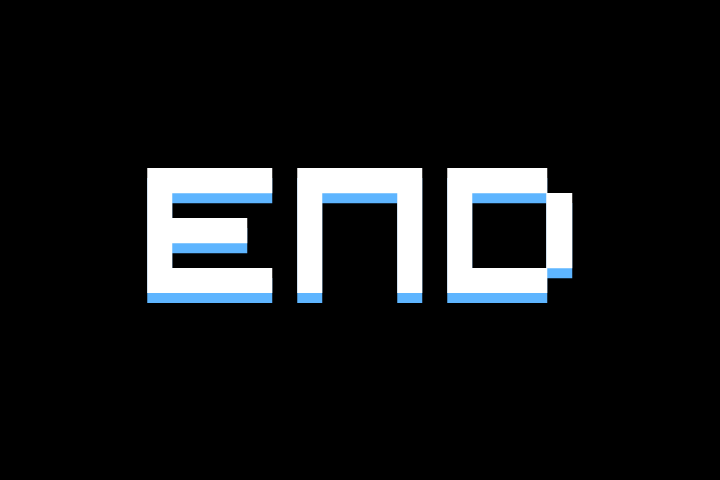
<style>
.page{position:relative;width:720px;height:480px;background:#000000}
.page>*{position:absolute;margin:0}
.t1{font:200px "Hooge0553";color:#ffffff}
</style>
<div class="page">
<p class="t1" style="left:147px;top:168px;width:426px;height:125px">END</p>
<p class="t1" style="left:147px;top:178px;width:426px;height:125px">END</p>
</div>
